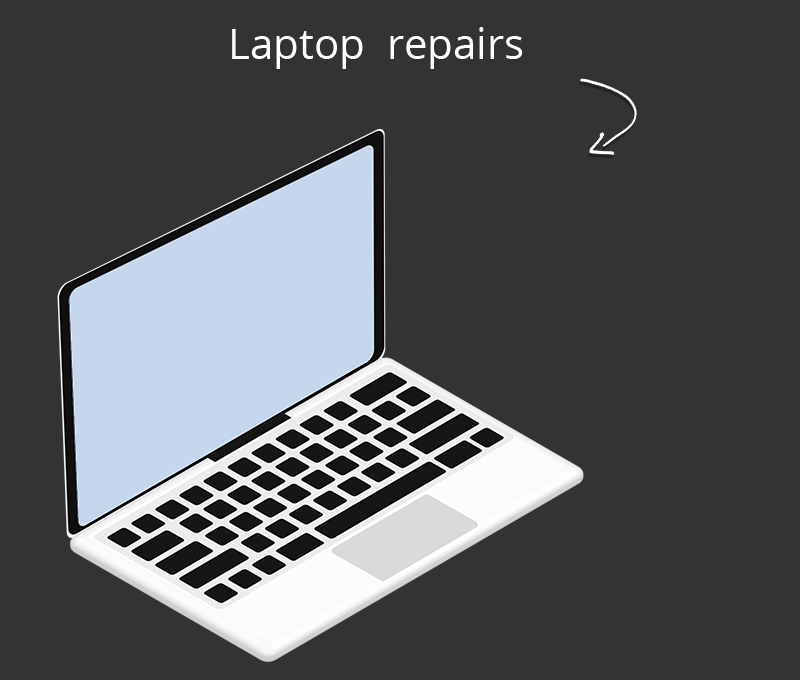
<style>
.page{position:relative;width:800px;height:680px;background:#333333}
.page>*{position:absolute;margin:0}
.t1{font:42px "OpenSans";color:#ffffff}
</style>
<div class="page">
<p class="t1" style="left:232px;top:27px;width:291px;height:42px">Laptop  repairs</p>
</div>
